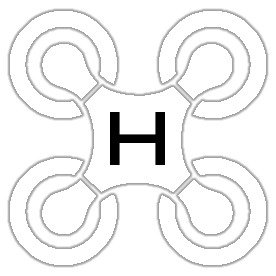
<style>
.page{position:relative;width:276px;height:276px;background:#ffffff}
.page>*{position:absolute;margin:0}
.t1{font:72px "Orbitron-Medium";color:#000000;font-weight:bold}
</style>
<div class="page">
<p class="t1" style="left:110px;top:112px;width:55px;height:53px">H</p>
</div>
